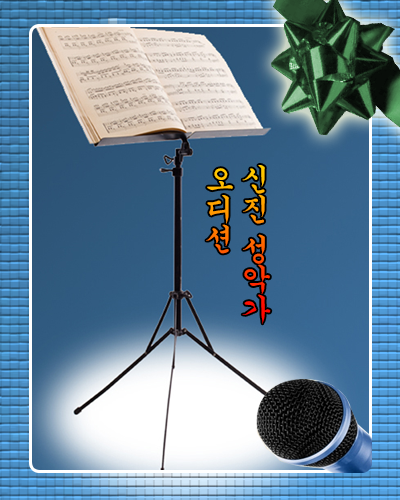
<style>
.page{position:relative;width:400px;height:500px}
.page>*{position:absolute;margin:0}
.t1{font:30px "Gungsuh"}
</style>
<div class="page">
<p class="t1" style="left:206px;top:165px;width:65px;height:159px">신진 성악가<br>오디션</p>
</div>
